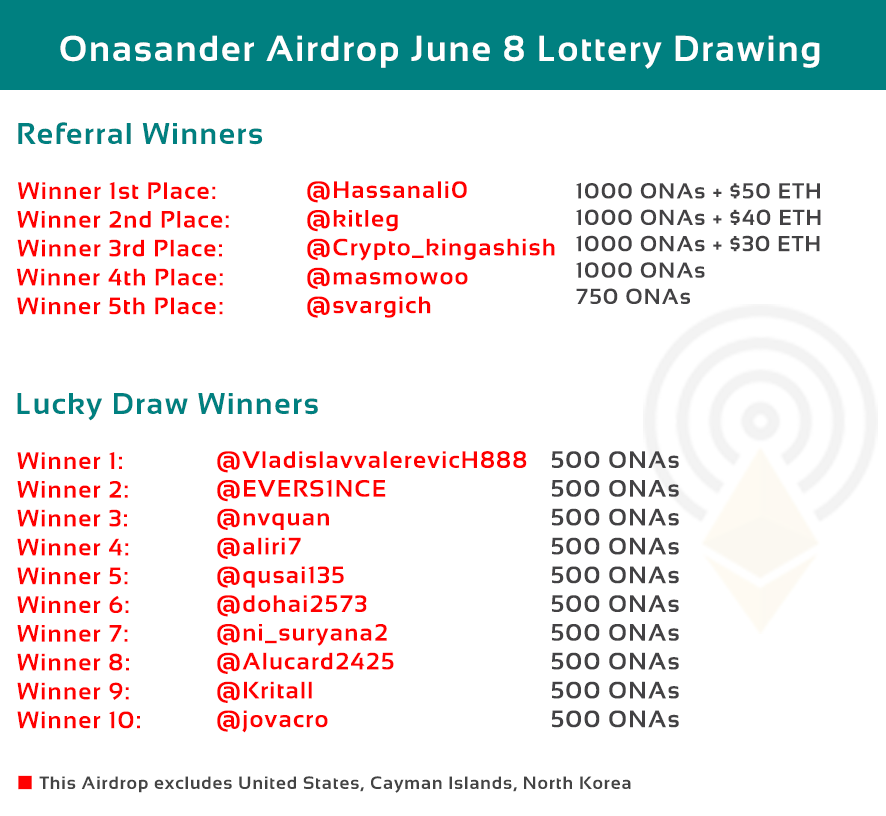
<style>
.page{position:relative;width:886px;height:816px;background:#ffffff}
.page>*{position:absolute;margin:0}
.t1{font:36px "Sansation-Bold";letter-spacing:0.05em;color:#ffffff}
.t2{font:30px "Sansation-Bold";letter-spacing:0.05em;color:#008080}
.t3{font:24px "Sansation-Bold";letter-spacing:0.05em;color:#ff0000}
.t4{font:22px "Sansation-Bold";letter-spacing:0.05em;color:#434244}
.t5{font:24px "Sansation-Bold";letter-spacing:0.05em;color:#434244}
.t6{font:18px "Sansation-Bold";letter-spacing:0.05em;color:#444444}
</style>
<div class="page">
<p class="t1" style="left:60px;top:35px;width:760px;height:34px">Onasander Airdrop June 8 Lottery Drawing</p>
<p class="t2" style="left:18px;top:122px;width:245px;height:23px">Referral Winners</p>
<p class="t3" style="left:17px;top:182px;width:212px;height:133px;text-align:center">Winner 1st Place:<br>  Winner 2nd Place:<br> Winner 3rd Place:<br> Winner 4th Place:<br> Winner 5th Place:</p>
<p class="t3" style="left:307px;top:181px;width:248px;height:137px">@Hassanali0<br>@kitleg<br>@Crypto_kingashish<br>@masmowoo<br>@svargich</p>
<p class="t4" style="left:576px;top:182px;width:245px;height:122px">1000 ONAs + $50 ETH<br>1000 ONAs + $40 ETH<br>1000 ONAs + $30 ETH<br>1000 ONAs<br>750 ONAs</p>
<p class="t2" style="left:17px;top:393px;width:301px;height:28px">Lucky Draw Winners</p>
<p class="t3" style="left:17px;top:452px;width:123px;height:277px">Winner 1: <br>Winner 2:<br>Winner 3:<br>Winner 4:<br>Winner 5:<br>Winner 6:<br>Winner 7:<br>Winner 8:<br>Winner 9:<br>Winner 10:</p>
<p class="t3" style="left:217px;top:451px;width:310px;height:282px">@VladislavvalerevicH888<br>@EVERS1NCE<br>@nvquan<br>@aliri7<br>@qusai135<br>@dohai2573<br>@ni_suryana2<br>@Alucard2425<br>@Kritall<br>@jovacro</p>
<p class="t5" style="left:552px;top:451px;width:127px;height:277px;text-align:center">500 ONAs<br>500 ONAs<br>500 ONAs<br>500 ONAs<br>500 ONAs<br>500 ONAs<br>500 ONAs<br>500 ONAs<br>500 ONAs<br>500 ONAs</p>
<p class="t6" style="left:39px;top:776px;width:592px;height:17px">This Airdrop excludes United States, Cayman Islands, North Korea</p>
</div>
